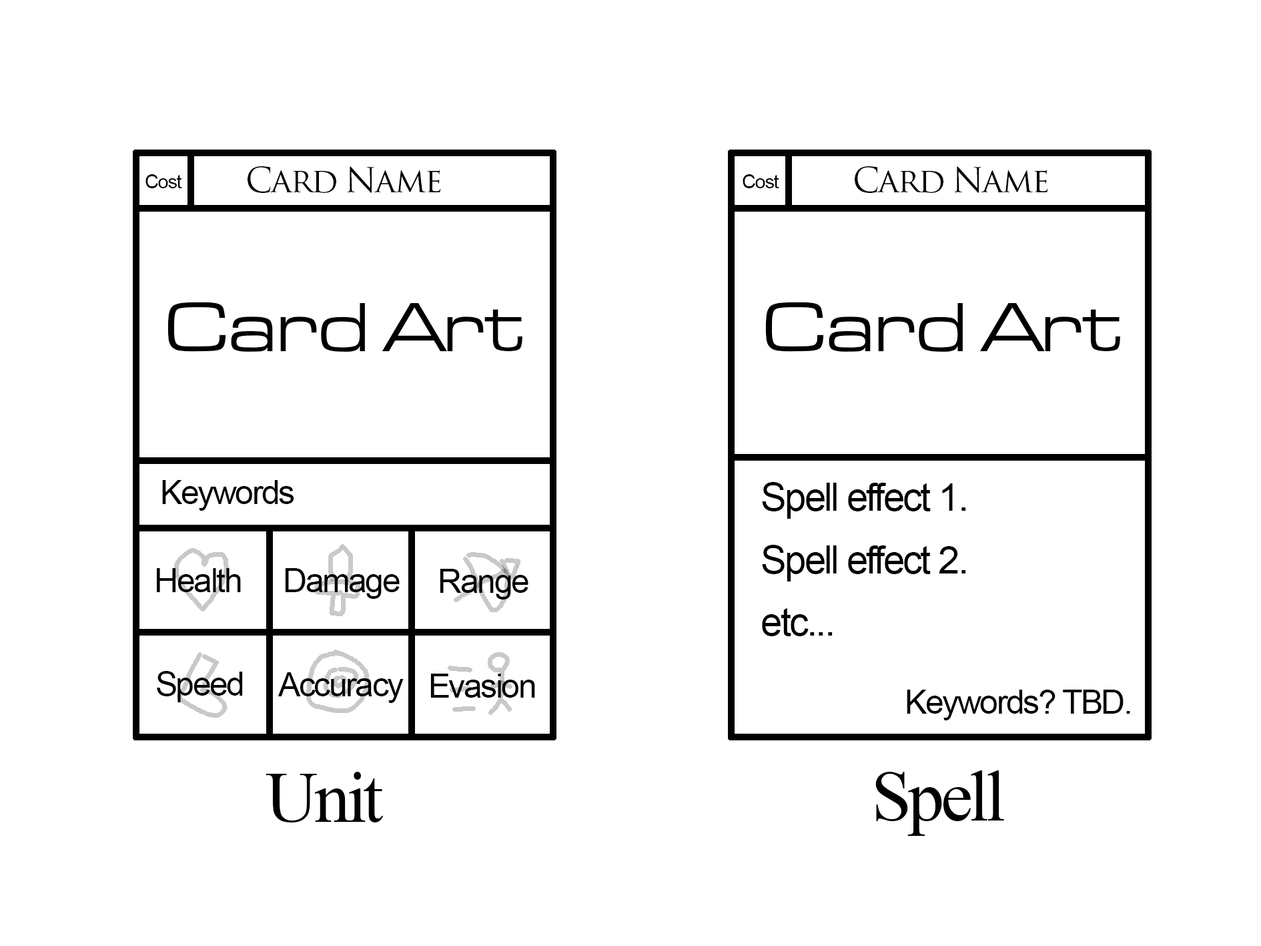
<style>
.page{position:relative;width:1261px;height:946px;background:#ffffff}
.page>*{position:absolute;margin:0}
.t1{font:33.4px "TrajanPro-Regular";letter-spacing:-0.05em;color:#000000}
.t2{font:19.5px "ArialMT";letter-spacing:-0.05em;color:#000000}
.t3{font:72.3px "EurostileExtended-Roman-DTC";letter-spacing:-0.05em;color:#000000}
.t4{font:33.4px "ArialMT";letter-spacing:-0.05em;color:#000000}
.t5{font:39px/31.2px "ArialMT";letter-spacing:-0.05em;color:#000000}
.t6{font:72.3px "TimesNewRomanPSMT";letter-spacing:-0.05em;color:#000000}
</style>
<div class="page">
<p class="t1" style="left:248px;top:166px;width:193px;height:27px">Card Name</p>
<p class="t1" style="left:855px;top:166px;width:193px;height:27px">Card Name</p>
<p class="t2" style="left:145px;top:174px;width:37px;height:14px">Cost</p>
<p class="t2" style="left:743px;top:174px;width:36px;height:14px">Cost</p>
<p class="t3" style="left:167px;top:302px;width:355px;height:50px">Card Art</p>
<p class="t3" style="left:765px;top:302px;width:355px;height:50px">Card Art</p>
<p class="t4" style="left:162px;top:480px;width:132px;height:30px">Keywords</p>
<p class="t5" style="left:762px;top:482px;width:204px;height:154px">Spell effect 1.<br><br>Spell effect 2.<br><br>etc...</p>
<p class="t4" style="left:157px;top:568px;width:84px;height:24px">Health</p>
<p class="t4" style="left:285px;top:568px;width:115px;height:31px">Damage</p>
<p class="t4" style="left:440px;top:569px;width:88px;height:30px">Range</p>
<p class="t4" style="left:157px;top:671px;width:86px;height:31px">Speed</p>
<p class="t4" style="left:278px;top:672px;width:126px;height:31px">Accuracy</p>
<p class="t4" style="left:430px;top:673px;width:105px;height:24px">Evasion</p>
<p class="t4" style="left:907px;top:689px;width:223px;height:31px">Keywords? TBD.</p>
<p class="t6" style="left:266px;top:771px;width:118px;height:51px">Unit</p>
<p class="t6" style="left:875px;top:770px;width:129px;height:65px">Spell</p>
</div>
